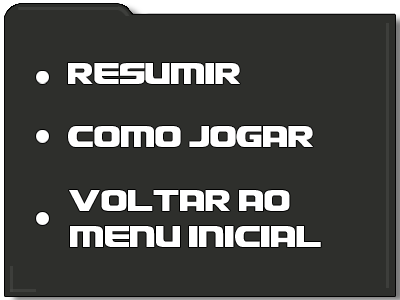
<style>
.page{position:relative;width:400px;height:300px;background:#2e2f2c}
.page>*{position:absolute;margin:0}
.t1{font:30.1px "RichardsonBrandRevolutionBlock";color:#ffffff}
</style>
<div class="page">
<p class="t1" style="left:68px;top:63px;width:172px;height:21px">Resumir</p>
<p class="t1" style="left:68px;top:126px;width:245px;height:21px">Como JOgar</p>
</div>
